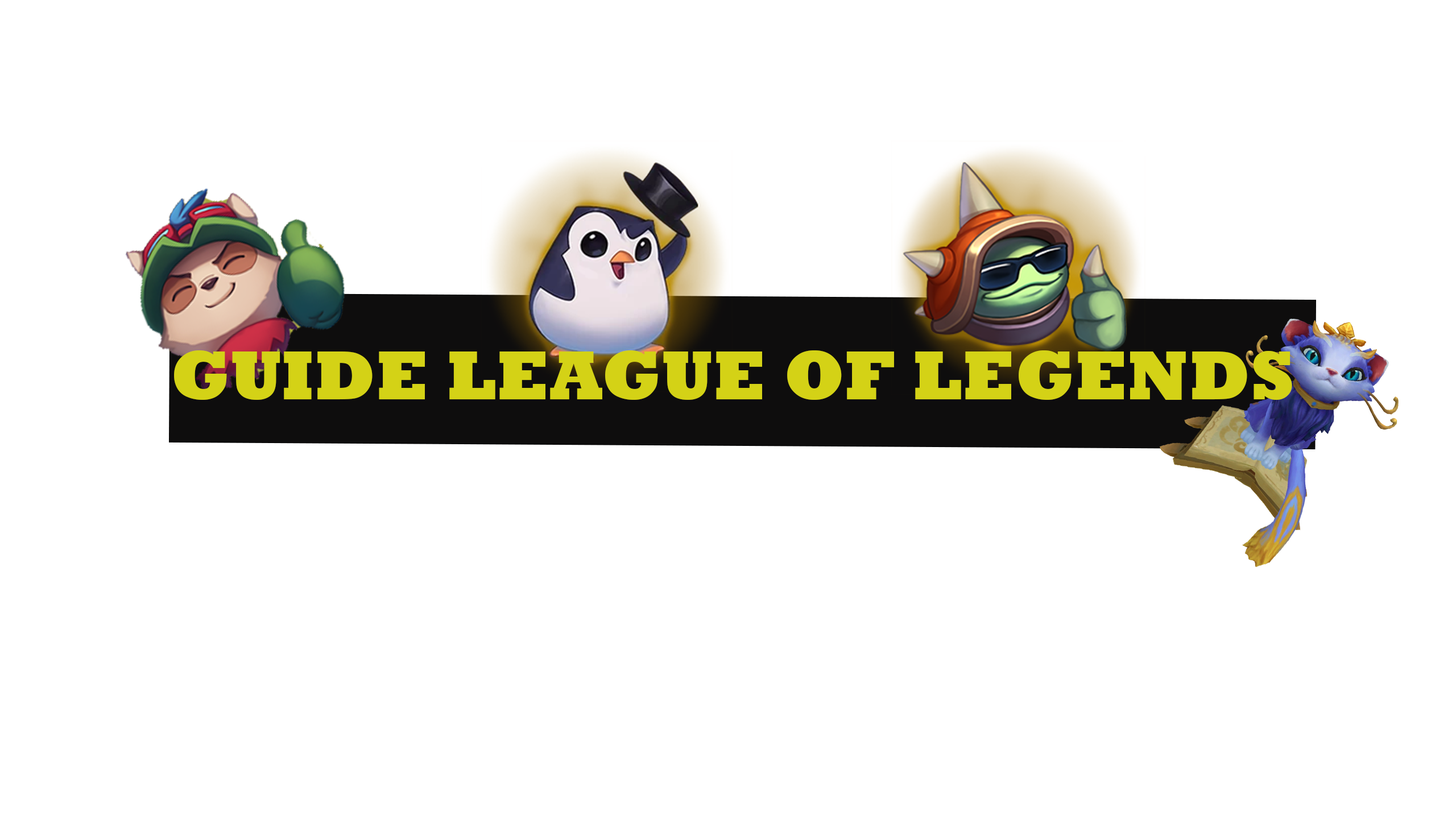
<style>
.page{position:relative;width:1456px;height:819px;background:#ffffff}
.page>*{position:absolute;margin:0}
.t1{font:70.8px "Rockwell-ExtraBold";color:#d4d216}
</style>
<div class="page">
<p class="t1" style="left:174px;top:350px;width:1118px;height:50px">GUIDE LEAGUE OF LEGENDS</p>
</div>
